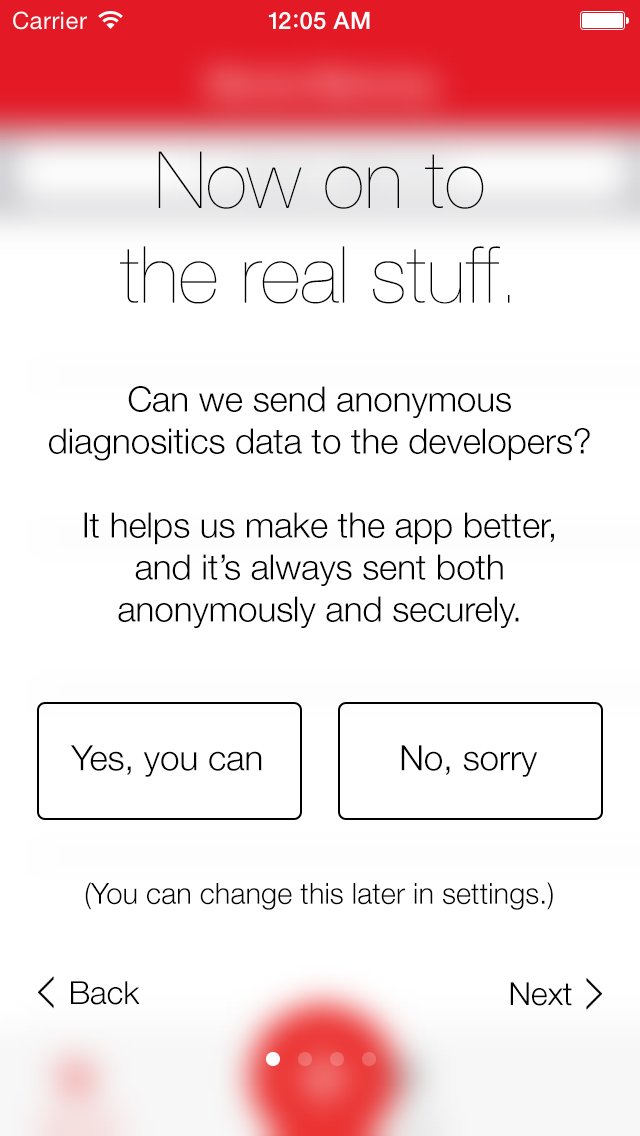
<style>
.page{position:relative;width:640px;height:1136px;background:#ffffff}
.page>*{position:absolute;margin:0}
.t1{font:79px "HelveticaNeue-UltraLight";color:#000000}
.t2{font:35px "HelveticaNeue-Light";color:#000000}
.t3{font:29px "HelveticaNeue-Light";color:#000000}
.t4{font:32px "HelveticaNeue-Light";color:#000000}
</style>
<div class="page">
<p class="t1" style="left:120px;top:151px;width:390px;height:153px;text-align:center">Now on to<br>the real stuff.</p>
<p class="t2" style="left:49px;top:386px;width:541px;height:242px;text-align:center">Can we send anonymous<br>diagnositics data to the developers?<br><br>It helps us make the app better,<br>and it’s always sent both<br>anonymously and securely.</p>
<p class="t2" style="left:71px;top:745px;width:191px;height:32px">Yes, you can</p>
<p class="t2" style="left:401px;top:745px;width:137px;height:32px">No, sorry</p>
<p class="t3" style="left:85px;top:882px;width:468px;height:28px">(You can change this later in settings.)</p>
<p class="t4" style="left:71px;top:981px;width:69px;height:24px">Back</p>
<p class="t4" style="left:510px;top:982px;width:62px;height:24px">Next</p>
</div>
